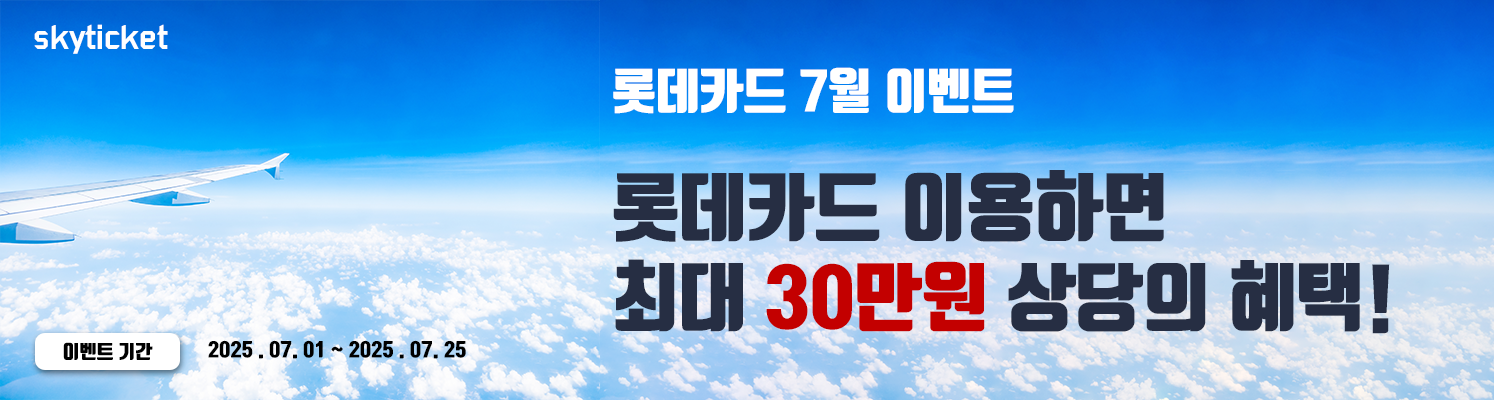
<style>
.page{position:relative;width:1494px;height:400px}
.page>*{position:absolute;margin:0}
.t1{font:35.5px "Bombardier";color:#ffffff}
.t2{font:48.2px "TmonMonsoriBlack";color:#ffffff}
.t3{font:74.3px "TmonMonsoriBlack";color:#262e43}
.t4{font:74.3px "TmonMonsoriBlack";color:#c30000}
.t5{font:18.7px "TmonMonsoriBlack";color:#000000}
.t6{font:18.9px "TmonMonsoriBlack";color:#000000}
</style>
<div class="page">
<p class="t1" style="left:34px;top:24px;width:134px;height:30px">skyticket</p>
<p class="t2" style="left:613px;top:67px;width:401px;height:47px">롯데카드 7월 이벤트</p>
<p class="t3" style="left:613px;top:170px;width:777px;height:164px">롯데카드 이용하면<br>최대 <span class="t4">30만원 </span>상당의 혜택!</p>
<p class="t5" style="left:63px;top:342px;width:90px;height:18px">이벤트 기간</p>
<p class="t6" style="left:208px;top:340px;width:258px;height:19px">2025 . 07. 01 ~ 2025 . 07. 25</p>
</div>
